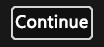
<style>
.page{position:relative;width:104px;height:47px;background:#181818}
.page>*{position:absolute;margin:0}
.t1{font:17.3px "SegoeUISymbol";color:#ffffff;font-weight:bold}
</style>
<div class="page">
<p class="t1" style="left:15px;top:14px;width:73px;height:15px">Continueee</p>
</div>
